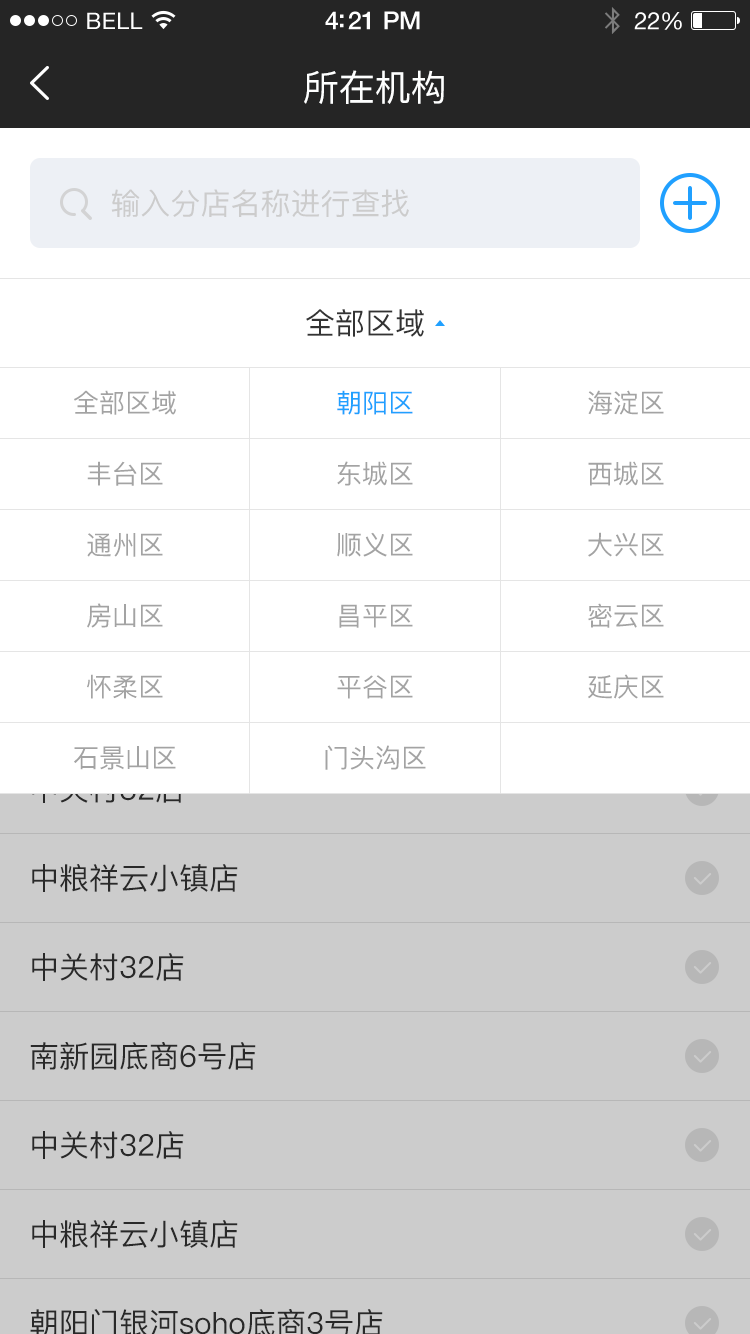
<style>
.page{position:relative;width:750px;height:1334px;background:#ffffff}
.page>*{position:absolute;margin:0}
.t1{font:23px "HelveticaNeue";letter-spacing:0.02em;color:#ffffff}
.t2{font:25px "HelveticaNeue-Medium";letter-spacing:-0.02em;color:#ffffff}
.t3{font:24px "HelveticaNeue";letter-spacing:-0.02em;color:#ffffff}
.t4{font:36px "PingFang-SC-Medium";color:#feffff}
.t5{font:30px "PingFang-SC-Medium";color:#cccccc}
.t6{font:30px "PingFang-SC-Medium";color:#333333}
.t7{font:26px "PingFang-SC-Medium";color:#a3a3a3}
.t8{font:26px "PingFang-SC-Medium";color:#20a0ff}
</style>
<div class="page">
<p class="t1" style="left:87px;top:12px;width:56px;height:17px">BELL</p>
<p class="t2" style="left:325px;top:11px;width:95px;height:19px">4:21 PM</p>
<p class="t3" style="left:634px;top:12px;width:48px;height:18px">22%</p>
<p class="t4" style="left:304px;top:70px;width:140px;height:34px">所在机构</p>
<p class="t5" style="left:111px;top:189px;width:298px;height:28px">输入分店名称进行查找</p>
<p class="t6" style="left:306px;top:309px;width:118px;height:28px">全部区域</p>
<p class="t7" style="left:74px;top:390px;width:102px;height:25px">全部区域</p>
<p class="t8" style="left:337px;top:390px;width:76px;height:25px">朝阳区</p>
<p class="t7" style="left:588px;top:390px;width:76px;height:25px">海淀区</p>
<p class="t7" style="left:87px;top:461px;width:76px;height:25px">丰台区</p>
<p class="t7" style="left:337px;top:461px;width:76px;height:25px">东城区</p>
<p class="t7" style="left:588px;top:461px;width:76px;height:25px">西城区</p>
<p class="t7" style="left:87px;top:533px;width:76px;height:24px">通州区</p>
<p class="t7" style="left:337px;top:532px;width:76px;height:25px">顺义区</p>
<p class="t7" style="left:588px;top:532px;width:76px;height:25px">大兴区</p>
<p class="t7" style="left:87px;top:603px;width:76px;height:25px">房山区</p>
<p class="t7" style="left:339px;top:604px;width:74px;height:24px">昌平区</p>
<p class="t7" style="left:588px;top:603px;width:76px;height:25px">密云区</p>
<p class="t7" style="left:87px;top:674px;width:76px;height:25px">怀柔区</p>
<p class="t7" style="left:337px;top:675px;width:76px;height:24px">平谷区</p>
<p class="t7" style="left:588px;top:674px;width:76px;height:25px">延庆区</p>
<p class="t7" style="left:74px;top:746px;width:102px;height:24px">石景山区</p>
<p class="t7" style="left:325px;top:745px;width:101px;height:25px">门头沟区</p>
<p class="t6" style="left:32px;top:864px;width:206px;height:28px">中粮祥云小镇店</p>
<p class="t6" style="left:32px;top:953px;width:152px;height:28px">中关村32店</p>
<p class="t6" style="left:30px;top:1042px;width:226px;height:28px">南新园底商6号店</p>
<p class="t6" style="left:32px;top:1131px;width:152px;height:28px">中关村32店</p>
<p class="t6" style="left:32px;top:1220px;width:206px;height:28px">中粮祥云小镇店</p>
</div>
